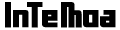
<style>
.page{position:relative;width:120px;height:30px;background:#ffffff}
.page>*{position:absolute;margin:0}
.t1{font:33.6px "KoreanCOMC-Regular-KSCpc-EUC-H";letter-spacing:-0.12em;color:#000000;font-weight:bold}
.t2{font:33.6px "KoreanCOMC-Regular-KSCpc-EUC-H";letter-spacing:-0.2em;color:#000000;font-weight:bold}
.t3{font:33.6px "KoreanCOMC-Regular-KSCpc-EUC-H";letter-spacing:-0.08em;color:#000000;font-weight:bold}
</style>
<div class="page">
<p class="t1" style="left:5px;top:2px;width:111px;height:26px">I<span class="t2">nT</span><span class="t3">e</span>Moa</p>
</div>
